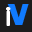
<style>
.page{position:relative;width:32px;height:32px;background:#1d1d1d}
.page>*{position:absolute;margin:0}
.t1{font:33.3px "Lucky7";color:#107bff}
.t2{font:33.3px "Neuropol";color:#ffffff}
</style>
<div class="page">
<p class="t1" style="left:7px;top:4px;width:22px;height:21px">V</p>
<p class="t2" style="left:6px;top:7px;width:5px;height:19px">i</p>
</div>
